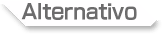
<style>
.page{position:relative;width:164px;height:34px;background:#fffeff}
.page>*{position:absolute;margin:0}
.t1{font:20px "NewRodinPro-B";color:#6c6b6c;scale:0.9 1}
</style>
<div class="page">
<p class="t1" style="left:21px;top:3px;width:116px;height:17px">Alternativo</p>
</div>
